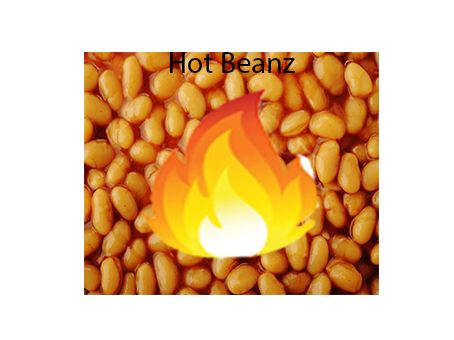
<style>
.page{position:relative;width:454px;height:340px;background:#ffffff}
.page>*{position:absolute;margin:0}
.t1{font:30px "MyriadPro-Regular";color:#000000}
</style>
<div class="page">
<p class="t1" style="left:170px;top:52px;width:125px;height:21px">Hot Beanz</p>
</div>
